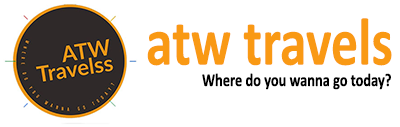
<style>
.page{position:relative;width:400px;height:127px;background:#ffffff}
.page>*{position:absolute;margin:0}
.t1{font:68px "Calibri-Bold";color:#ee971f;scale:0.79 1}
.t2{font:18.1px "Calibri-Bold";color:#000000;scale:0.79 1}
</style>
<div class="page">
<p class="t1" style="left:147px;top:18px;width:245px;height:48px">atw travels</p>
<p class="t2" style="left:202px;top:73px;width:189px;height:17px">Where do you wanna go today?</p>
</div>
